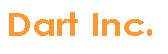
<style>
.page{position:relative;width:168px;height:54px;background:#ffffff}
.page>*{position:absolute;margin:0}
.t1{font:32.4px "LevenimMT-Bold";color:#ff9933;scale:1.11 1}
</style>
<div class="page">
<p class="t1" style="left:9px;top:12px;width:143px;height:24px">Dart Inc.</p>
</div>
